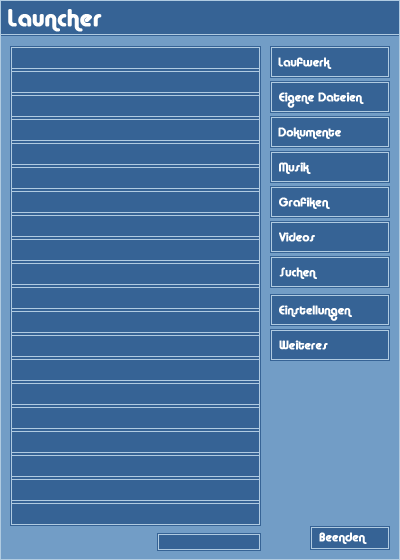
<style>
.page{position:relative;width:400px;height:560px;background:#366395}
.page>*{position:absolute;margin:0}
.t1{font:24px "Alba";letter-spacing:0.01em;color:#fffffe;font-weight:bold}
.t2{font:12px "Alba";letter-spacing:0.01em;color:#ffffff;font-weight:bold}
</style>
<div class="page">
<p class="t1" style="left:8px;top:9px;width:94px;height:23px">Launcher</p>
<p class="t2" style="left:278px;top:57px;width:54px;height:12px">Laufwerk</p>
<p class="t2" style="left:279px;top:92px;width:85px;height:16px">Eigene Dateien</p>
<p class="t2" style="left:278px;top:127px;width:63px;height:12px">Dokumente</p>
<p class="t2" style="left:279px;top:162px;width:32px;height:12px">Musik</p>
<p class="t2" style="left:279px;top:197px;width:51px;height:12px">Grafiken</p>
<p class="t2" style="left:279px;top:232px;width:36px;height:10px">Videos</p>
<p class="t2" style="left:279px;top:267px;width:38px;height:12px">Suchen</p>
<p class="t2" style="left:279px;top:305px;width:73px;height:16px">Einstellungen</p>
<p class="t2" style="left:279px;top:340px;width:49px;height:10px">Weiteres</p>
<p class="t2" style="left:319px;top:532px;width:48px;height:12px">Beenden</p>
</div>
